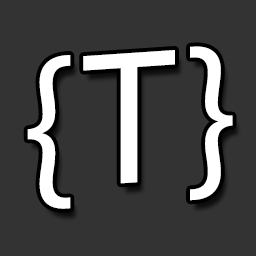
<style>
.page{position:relative;width:256px;height:256px;background:#333333}
.page>*{position:absolute;margin:0}
.t1{font:192.2px "MyriadPro-Regular";color:#ffffff;scale:0.96 1}
</style>
<div class="page">
<p class="t1" style="left:27px;top:46px;width:206px;height:163px;rotate:-4deg">{T}</p>
</div>
